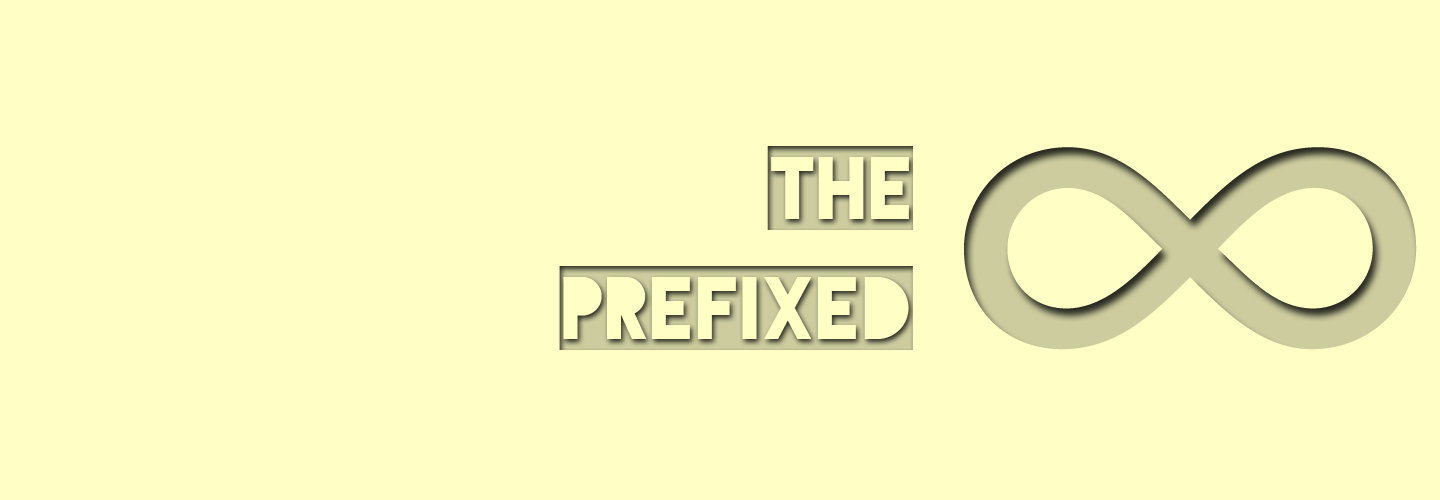
<style>
.page{position:relative;width:1440px;height:500px;background:#ffffc5}
.page>*{position:absolute;margin:0}
.t1{font:100px "Blackout-2AM"}
</style>
<div class="page">
<p class="t1" style="left:559px;top:146px;width:354px;height:204px;text-align:right">The<br>Prefixed</p>
</div>
